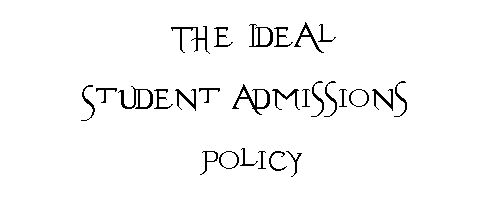
<style>
.page{position:relative;width:500px;height:200px;background:#ffffff}
.page>*{position:absolute;margin:0}
.t1{font:51.3px "Evanescent";color:#000000}
</style>
<div class="page">
<p class="t1" style="left:81px;top:22px;width:326px;height:155px;text-align:center">The Ideal<br>Student Admissions <br>Policy</p>
</div>
